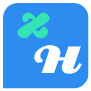
<style>
.page{position:relative;width:91px;height:91px;background:#2d8cf0}
.page>*{position:absolute;margin:0}
.t1{font:48px "Shrikhand-Regular";color:#34e4b4}
.t2{font:48px "Creampuff";color:#ffffff}
</style>
<div class="page">
<p class="t1" style="left:17px;top:12px;width:33px;height:27px">z</p>
<p class="t2" style="left:34px;top:45px;width:48px;height:29px">H</p>
</div>
